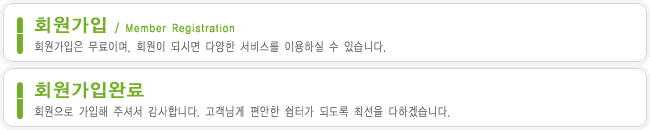
<style>
.page{position:relative;width:650px;height:130px;background:#ffffff}
.page>*{position:absolute;margin:0}
.t1{font:18px "YDIYGO130-KSCPC-EUC-H";color:#70af26;font-weight:bold}
.t2{font:12px "YDIYGO130-KSCPC-EUC-H";letter-spacing:0.025em;color:#70af26;font-weight:bold;scale:0.8 1}
.t3{font:12px "YDIYGO110-KSCPC-EUC-H";color:#505050;font-weight:bold;scale:0.8 1}
</style>
<div class="page">
<p class="t1" style="left:35px;top:16px;width:71px;height:18px">회원가입</p>
<p class="t2" style="left:114px;top:22px;width:120px;height:12px">/ Member Registration</p>
<p class="t3" style="left:35px;top:41px;width:350px;height:12px">회원가입은 무료이며, 회원이 되시면 다양한 서비스를 이용하실 수 있습니다.</p>
<p class="t1" style="left:35px;top:81px;width:109px;height:18px">회원가입완료</p>
<p class="t3" style="left:35px;top:106px;width:415px;height:11px">회원으로 가입해 주셔서 감사합니다. 고객님게 편안한 쉼터가 되도록 최선을 다하겠습니다.</p>
</div>
